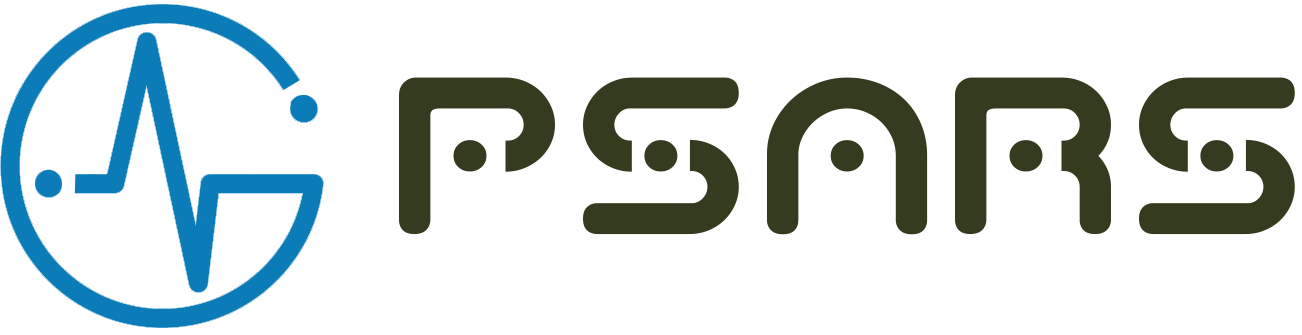
<style>
.page{position:relative;width:1302px;height:335px;background:#ffffff}
.page>*{position:absolute;margin:0}
.t1{font:230px "PlanetXCompact";color:#343b1e}
</style>
<div class="page">
<p class="t1" style="left:399px;top:77px;width:896px;height:158px">PSARS</p>
</div>
